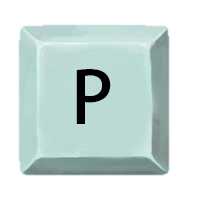
<style>
.page{position:relative;width:200px;height:200px;background:#ffffff}
.page>*{position:absolute;margin:0}
.t1{font:72px "AdobeHeitiStd-Regular";color:#000000}
</style>
<div class="page">
<p class="t1" style="left:76px;top:69px;width:35px;height:55px">P</p>
</div>
